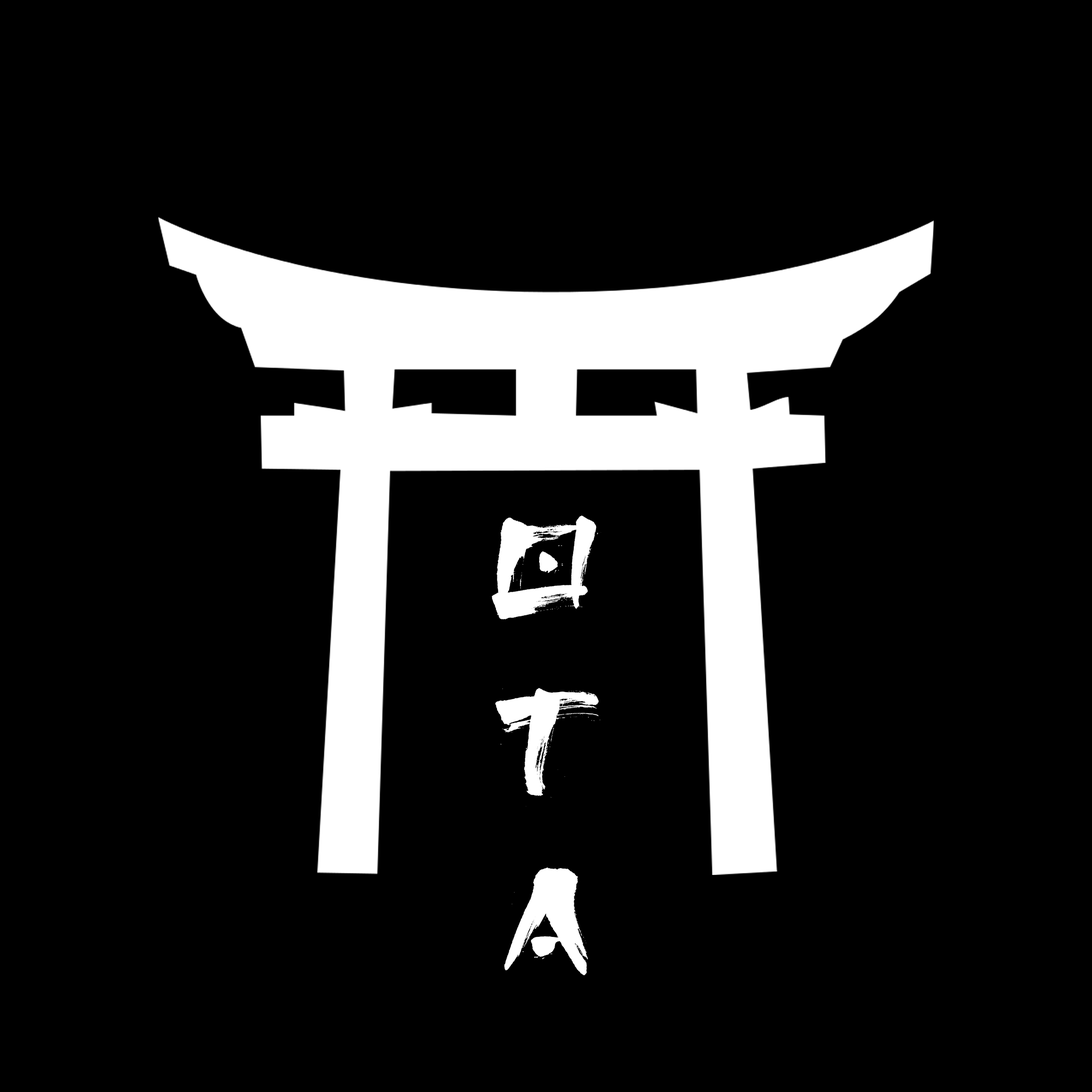
<style>
.page{position:relative;width:1092px;height:1092px;background:#000000}
.page>*{position:absolute;margin:0}
.t1{font:146.1px "Osake";color:#ffffff}
</style>
<div class="page">
<p class="t1" style="left:492px;top:515px;width:109px;height:460px;text-align:center">O<br>T<br>A</p>
</div>
